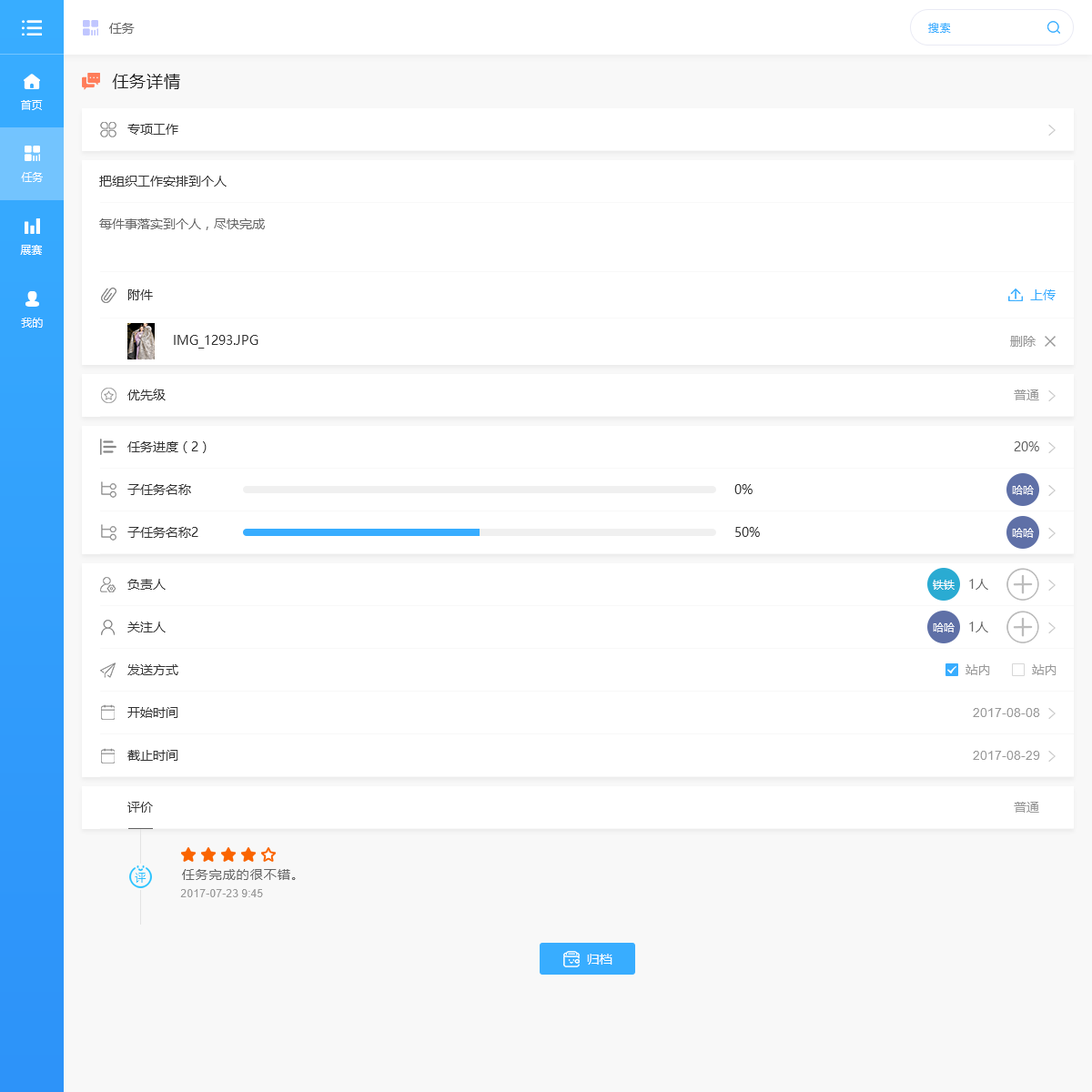
<style>
.page{position:relative;width:1092px;height:1092px;background:#ffffff}
.page>*{position:absolute;margin:0}
.t1{font:12.7px "MicrosoftYaHei";color:#666666}
.t2{font:10.9px "MicrosoftYaHei";letter-spacing:0.05em;color:#38adff}
.t3{font:16.4px "MicrosoftYaHei";letter-spacing:0.05em;color:#222222}
.t4{font:10.9px "MicrosoftYaHei";color:#ffffff}
.t5{font:12.7px "MicrosoftYaHei";color:#333333}
.t6{font:12.7px "MicrosoftYaHei";color:#38adff}
.t7{font:12.7px "MicrosoftYaHei";color:#999999}
.t8{font:12.7px "ArialMT";color:#999999}
.t9{font:12.7px "MicrosoftYaHei";letter-spacing:0.075em;color:#666666}
.t10{font:10.9px "MicrosoftYaHei";letter-spacing:0.075em;color:#25c1ff}
.t11{font:10.9px "ArialMT";color:#999999}
.t12{font:12.7px "MicrosoftYaHei";color:#ffffff}
</style>
<div class="page">
<p class="t1" style="left:109px;top:23px;width:26px;height:11px">任务</p>
<p class="t2" style="left:928px;top:23px;width:23px;height:10px">搜索</p>
<p class="t3" style="left:112px;top:74px;width:68px;height:15px">任务详情</p>
<p class="t4" style="left:21px;top:100px;width:22px;height:10px">首页</p>
<p class="t5" style="left:127px;top:124px;width:51px;height:11px">专项工作</p>
<p class="t4" style="left:21px;top:172px;width:22px;height:10px">任务</p>
<p class="t5" style="left:99px;top:176px;width:128px;height:11px">把组织工作安排到个人</p>
<p class="t1" style="left:99px;top:218px;width:166px;height:12px">每件事落实到个人，尽快完成</p>
<p class="t4" style="left:20px;top:245px;width:22px;height:10px">展赛</p>
<p class="t5" style="left:127px;top:289px;width:26px;height:11px">附件</p>
<p class="t6" style="left:1030px;top:289px;width:26px;height:11px">上传</p>
<p class="t4" style="left:21px;top:318px;width:22px;height:10px">我的</p>
<p class="t5" style="left:174px;top:335px;width:84px;height:14px">IMG_1293.JPG</p>
<p class="t7" style="left:1010px;top:336px;width:26px;height:11px">删除</p>
<p class="t5" style="left:127px;top:389px;width:39px;height:11px">优先级</p>
<p class="t7" style="left:1014px;top:389px;width:25px;height:11px">普通</p>
<p class="t5" style="left:127px;top:441px;width:80px;height:12px">任务进度（2）</p>
<p class="t1" style="left:1014px;top:441px;width:25px;height:10px">20%</p>
<p class="t5" style="left:127px;top:484px;width:64px;height:11px">子任务名称</p>
<p class="t5" style="left:734px;top:484px;width:19px;height:10px">0%</p>
<p class="t4" style="left:1012px;top:485px;width:22px;height:10px">哈哈</p>
<p class="t5" style="left:127px;top:527px;width:71px;height:11px">子任务名称2</p>
<p class="t5" style="left:735px;top:527px;width:25px;height:10px">50%</p>
<p class="t4" style="left:1012px;top:528px;width:22px;height:10px">哈哈</p>
<p class="t5" style="left:127px;top:579px;width:39px;height:11px">负责人</p>
<p class="t4" style="left:933px;top:580px;width:22px;height:10px">铁铁</p>
<p class="t1" style="left:969px;top:579px;width:19px;height:11px">1人</p>
<p class="t5" style="left:127px;top:622px;width:39px;height:10px">关注人</p>
<p class="t4" style="left:933px;top:622px;width:22px;height:10px">哈哈</p>
<p class="t1" style="left:969px;top:622px;width:19px;height:10px">1人</p>
<p class="t5" style="left:127px;top:664px;width:51px;height:11px">发送方式</p>
<p class="t7" style="left:965px;top:664px;width:25px;height:11px">站内</p>
<p class="t7" style="left:1032px;top:664px;width:24px;height:11px">站内</p>
<p class="t5" style="left:127px;top:707px;width:51px;height:11px">开始时间</p>
<p class="t8" style="left:973px;top:708px;width:67px;height:9px">2017-08-08</p>
<p class="t5" style="left:127px;top:750px;width:51px;height:11px">截止时间</p>
<p class="t8" style="left:973px;top:751px;width:67px;height:9px">2017-08-29</p>
<p class="t5" style="left:127px;top:802px;width:26px;height:11px">评价</p>
<p class="t7" style="left:1014px;top:802px;width:25px;height:11px">普通</p>
<p class="t9" style="left:182px;top:869px;width:114px;height:11px">任务完成的很不错。</p>
<p class="t10" style="left:135px;top:873px;width:12px;height:10px">评</p>
<p class="t11" style="left:180px;top:889px;width:83px;height:8px">2017-07-23 9:45</p>
<p class="t12" style="left:587px;top:954px;width:25px;height:11px">归档</p>
</div>
